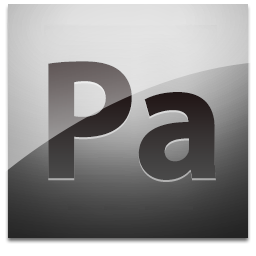
<style>
.page{position:relative;width:256px;height:256px}
.page>*{position:absolute;margin:0}
.t1{font:172.1px "MyriadPro-Bold"}
</style>
<div class="page">
<p class="t1" style="left:48px;top:61px;width:168px;height:119px">Pa</p>
</div>
